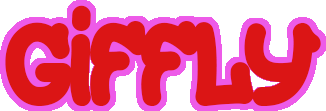
<style>
.page{position:relative;width:326px;height:111px;background:#db1515}
.page>*{position:absolute;margin:0}
.t1{font:133.3px "Painterz";color:#db1515}
</style>
<div class="page">
<p class="t1" style="left:5px;top:5px;width:316px;height:101px">Giffly</p>
</div>
